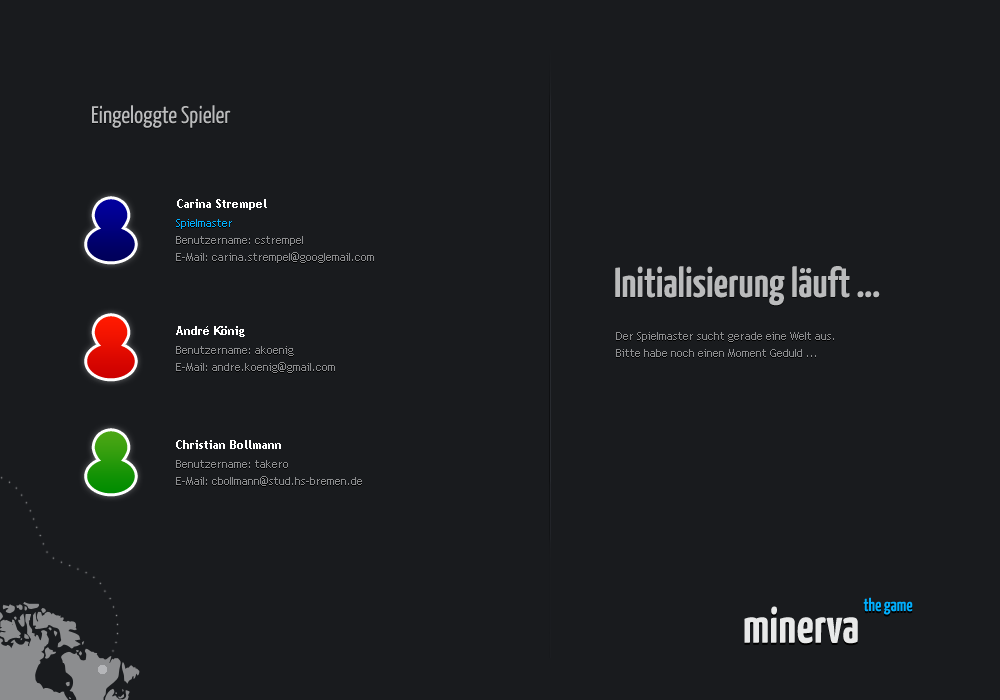
<style>
.page{position:relative;width:1000px;height:700px;background:#191b1e}
.page>*{position:absolute;margin:0}
.t1{font:24px "YanoneKaffeesatz-Regular";color:#babbbc}
.t2{font:12px "TrebuchetMS-Bold";color:#ffffff}
.t3{font:11px/17px "TrebuchetMS";color:#8c8d8f}
.t4{font:11px/17px "TrebuchetMS";color:#01aefd}
.t5{font:42px "YanoneKaffeesatz-Bold";color:#babbbc}
.t6{font:50px "YanoneKaffeesatz-Bold";color:#ffffff}
.t7{font:18px "YanoneKaffeesatz-Bold";color:#01aefd}
</style>
<div class="page">
<p class="t1" style="left:92px;top:105px;width:139px;height:23px">Eingeloggte Spieler</p>
<p class="t2" style="left:177px;top:199px;width:90px;height:11px">Carina Strempel</p>
<p class="t3" style="left:176px;top:219px;width:198px;height:44px"><span class="t4">Spielmaster<br></span>Benutzername: cstrempel<br>E-Mail: carina.strempel@googlemail.com</p>
<p class="t5" style="left:615px;top:266px;width:265px;height:40px">Initialisierung läuft ...</p>
<p class="t2" style="left:176px;top:326px;width:69px;height:11px">André König</p>
<p class="t3" style="left:616px;top:332px;width:218px;height:25px">Der Spielmaster sucht gerade eine Welt aus.<br>Bitte habe noch einen Moment Geduld ...</p>
<p class="t3" style="left:176px;top:346px;width:159px;height:27px">Benutzername: akoenig<br>E-Mail: andre.koenig@gmail.com</p>
<p class="t2" style="left:176px;top:440px;width:105px;height:9px">Christian Bollmann</p>
<p class="t3" style="left:176px;top:460px;width:186px;height:26px">Benutzername: takero<br>E-Mail: cbollmann@stud.hs-bremen.de</p>
<p class="t6" style="left:744px;top:606px;width:114px;height:38px">minerva</p>
<p class="t7" style="left:863px;top:597px;width:50px;height:18px">the game</p>
</div>
